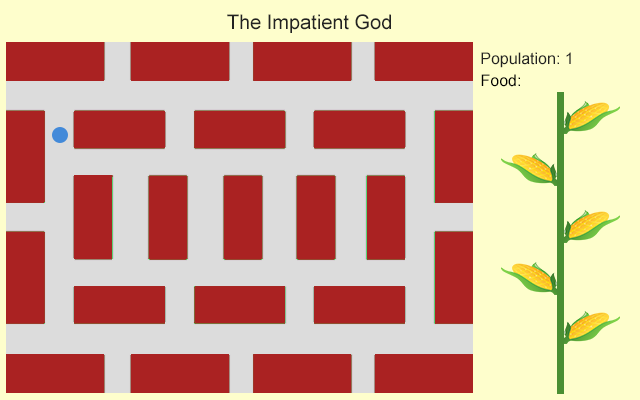
<style>
.page{position:relative;width:640px;height:400px;background:#fefecc}
.page>*{position:absolute;margin:0}
.t1{font:20px "ArialMT";color:#222222}
.t2{font:16px "ArialMT";color:#222222}
.t3{font:16px "ArialMT";color:#000000}
</style>
<div class="page">
<p class="t1" style="left:227px;top:14px;width:164px;height:19px">The Impatient God</p>
<p class="t2" style="left:481px;top:52px;width:90px;height:16px">Population: 1</p>
<p class="t3" style="left:481px;top:74px;width:39px;height:13px">Food:</p>
</div>
